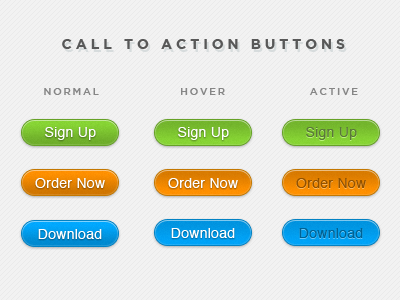
<style>
.page{position:relative;width:400px;height:300px;background:#f2f2f2}
.page>*{position:absolute;margin:0}
.t1{font:14px "GothamBold";letter-spacing:0.28em;color:#414141}
.t2{font:10px "GothamMedium";letter-spacing:0.18em;color:#868686}
.t3{font:14px "Helvetica";letter-spacing:0.02em;color:#ffffff}
.t4{font:14px "Helvetica";letter-spacing:0.02em;color:#5a773a}
.t5{font:14px "Helvetica";letter-spacing:0.02em;color:#925200}
.t6{font:14px "Helvetica";letter-spacing:0.02em;color:#006294}
</style>
<div class="page">
<p class="t1" style="left:62px;top:39px;width:283px;height:10px">CALL TO ACTION BUTTONS</p>
<p class="t2" style="left:44px;top:88px;width:314px;height:7px">NORMAL        HOVER     ACTIVE</p>
<p class="t3" style="left:45px;top:127px;width:51px;height:13px">Sign Up</p>
<p class="t3" style="left:178px;top:127px;width:51px;height:13px">Sign Up</p>
<p class="t4" style="left:306px;top:127px;width:51px;height:13px">Sign Up</p>
<p class="t3" style="left:35px;top:178px;width:70px;height:10px">Order Now</p>
<p class="t3" style="left:168px;top:178px;width:70px;height:10px">Order Now</p>
<p class="t5" style="left:296px;top:178px;width:70px;height:10px">Order Now</p>
<p class="t3" style="left:38px;top:229px;width:64px;height:10px">Download</p>
<p class="t3" style="left:171px;top:228px;width:64px;height:10px">Download</p>
<p class="t6" style="left:299px;top:228px;width:64px;height:10px">Download</p>
</div>
